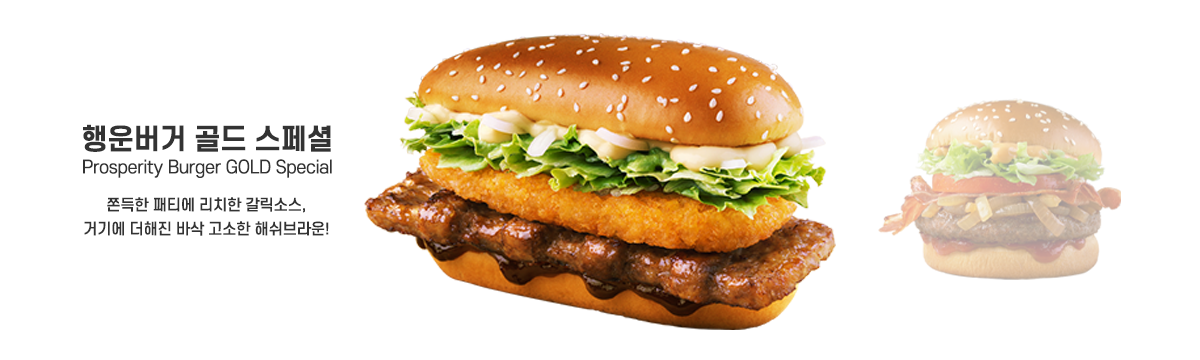
<style>
.page{position:relative;width:1200px;height:360px;background:#ffffff}
.page>*{position:absolute;margin:0}
.t1{font:17.5px/24px "S-CoreDream-4Regular";letter-spacing:-0.02em;color:#333333}
.t2{font:28px/24px "S-CoreDream-6Bold";letter-spacing:-0.02em;color:#333333}
.t3{font:15px/24px "S-CoreDream-5Medium";letter-spacing:-0.02em;color:#333333}
</style>
<div class="page">
<p class="t1" style="left:83px;top:124px;width:249px;height:54px;text-align:center"><span class="t2">행운버거 골드 스페셜<br></span>Prosperity Burger GOLD Special</p>
<p class="t3" style="left:84px;top:197px;width:245px;height:39px;text-align:center">쫀득한 패티에 리치한 갈릭소스,<br>거기에 더해진 바삭 고소한 해쉬브라운!</p>
</div>
